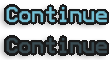
<style>
.page{position:relative;width:111px;height:60px;background:#1a1a1a}
.page>*{position:absolute;margin:0}
.t1{font:17px "VHSGothic";color:#73bed3}
</style>
<div class="page">
<p class="t1" style="left:6px;top:6px;width:101px;height:17px">Continue</p>
</div>
